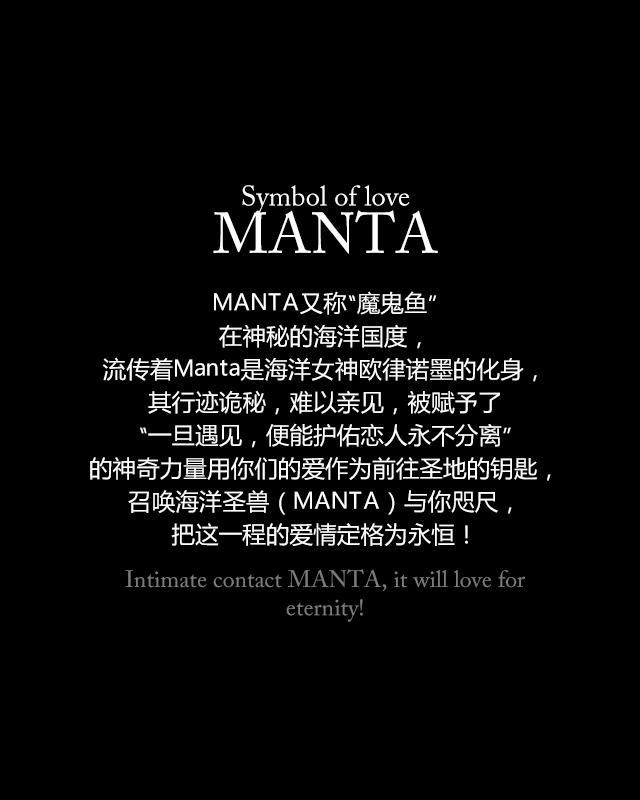
<style>
.page{position:relative;width:640px;height:800px;background:#000000}
.page>*{position:absolute;margin:0}
.t1{font:28.3px/47.2px "ACaslonPro-Regular";color:#ffffff}
.t2{font:56.7px/47.2px "ACaslonPro-Regular";color:#ffffff}
.t3{font:23.6px/33.1px "MicrosoftYaHei";color:#ffffff}
.t4{font:23.6px "ACaslonPro-Regular";color:#7d7d7d}
</style>
<div class="page">
<p class="t1" style="left:213px;top:185px;width:225px;height:69px;text-align:center">Symbol of love<br><span class="t2">MANTA</span></p>
<p class="t3" style="left:90px;top:291px;width:461px;height:255px;text-align:center">MANTA又称“魔鬼鱼”<br>在神秘的海洋国度，<br>流传着Manta是海洋女神欧律诺墨的化身，<br>其行迹诡秘，难以亲见，被赋予了<br>“一旦遇见，便能护佑恋人永不分离”<br>的神奇力量用你们的爱作为前往圣地的钥匙，<br>召唤海洋圣兽（MANTA）与你咫尺，<br>把这一程的爱情定格为永恒！</p>
<p class="t4" style="left:125px;top:569px;width:400px;height:53px;text-align:center">Intimate contact MANTA, it will love for eternity!</p>
</div>
